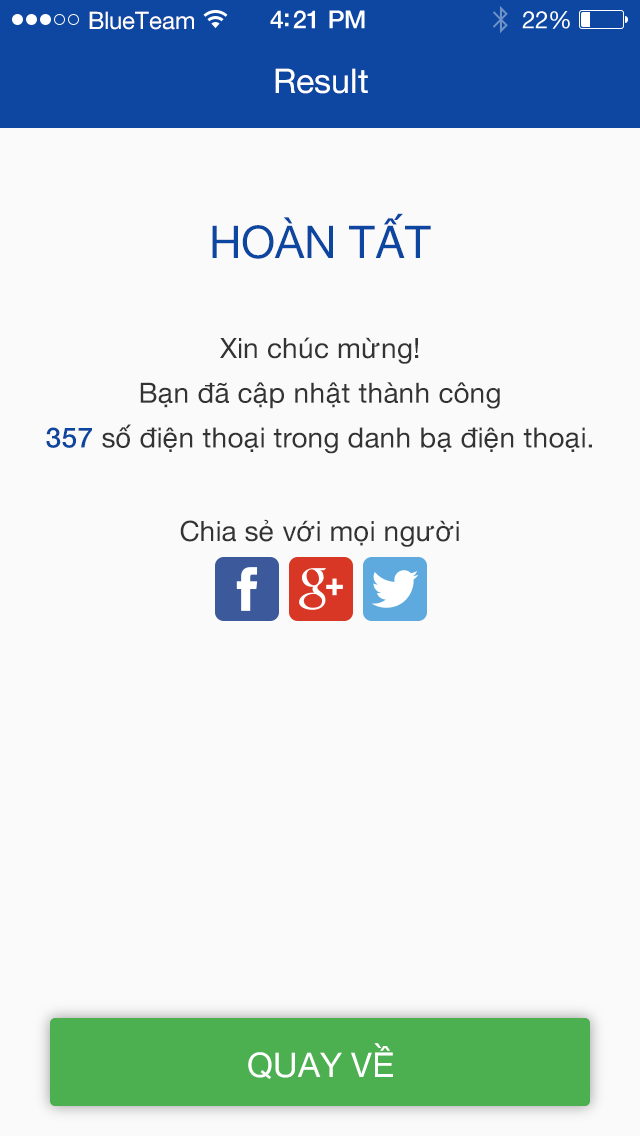
<style>
.page{position:relative;width:640px;height:1136px;background:#fafafa}
.page>*{position:absolute;margin:0}
.t1{font:24px "HelveticaNeue";color:#ffffff}
.t2{font:34px "HelveticaNeue";color:#ffffff}
.t3{font:45px "HelveticaNeue";color:#0c46a0}
.t4{font:28px/44.8px "HelveticaNeue";color:#333333}
.t5{font:28px/44.8px "HelveticaNeue-Medium";color:#0c469f}
.t6{font:28px "HelveticaNeue";color:#333333}
</style>
<div class="page">
<p class="t1" style="left:89px;top:11px;width:105px;height:19px">BlueTeam</p>
<p class="t2" style="left:275px;top:68px;width:93px;height:26px">Result</p>
<p class="t3" style="left:212px;top:213px;width:219px;height:46px">HOÀN TẤT</p>
<p class="t4" style="left:46px;top:337px;width:546px;height:117px;text-align:center">Xin chúc mừng!<br>Bạn đã cập nhật thành công<br><span class="t5">357</span> số điện thoại trong danh bạ điện thoại.</p>
<p class="t6" style="left:180px;top:519px;width:279px;height:28px">Chia sẻ với mọi người</p>
<p class="t2" style="left:248px;top:1043px;width:145px;height:36px">QUAY VỀ</p>
</div>
